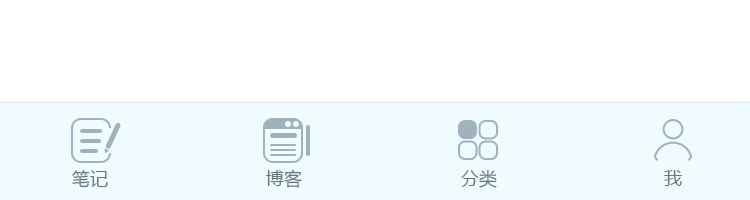
<style>
.page{position:relative;width:750px;height:200px;background:#ffffff}
.page>*{position:absolute;margin:0}
.t1{font:18px "MicrosoftYaHei";color:#65777f}
</style>
<div class="page">
<p class="t1" style="left:72px;top:170px;width:36px;height:18px">笔记</p>
<p class="t1" style="left:266px;top:169px;width:36px;height:19px">博客</p>
<p class="t1" style="left:461px;top:170px;width:36px;height:18px">分类</p>
<p class="t1" style="left:664px;top:170px;width:18px;height:16px">我</p>
</div>
